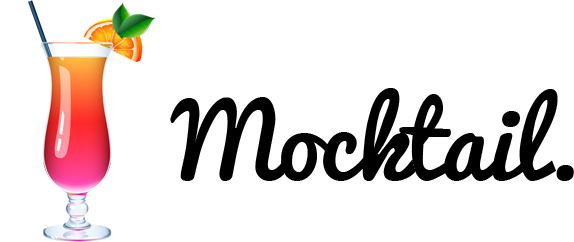
<style>
.page{position:relative;width:574px;height:242px;background:#ffffff}
.page>*{position:absolute;margin:0}
.t1{font:100px "Pacifico";color:#000000}
</style>
<div class="page">
<p class="t1" style="left:170px;top:88px;width:404px;height:93px">Mocktail.</p>
</div>
